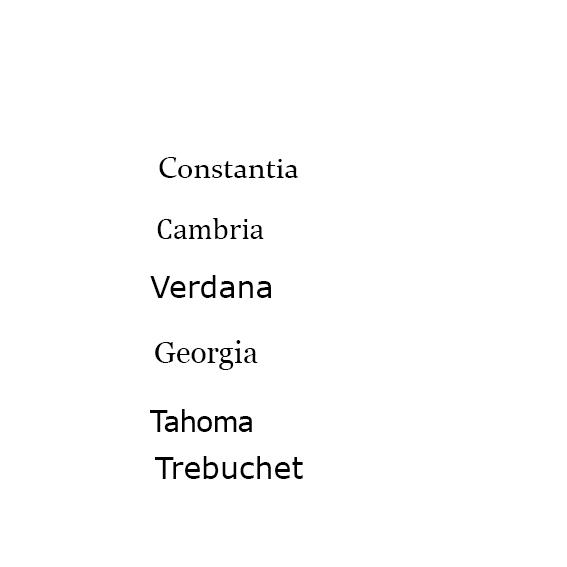
<style>
.page{position:relative;width:567px;height:567px;background:#ffffff}
.page>*{position:absolute;margin:0}
.t1{font:30px "Constantia";color:#000000}
.t2{font:30px "Cambria";color:#000000}
.t3{font:30px "Verdana";color:#000000}
.t4{font:30px "Georgia";color:#000000}
.t5{font:30px "Tahoma";color:#000000}
</style>
<div class="page">
<p class="t1" style="left:159px;top:157px;width:140px;height:21px">Constantia</p>
<p class="t2" style="left:157px;top:218px;width:107px;height:21px">Cambria</p>
<p class="t3" style="left:150px;top:275px;width:121px;height:23px">Verdana</p>
<p class="t4" style="left:155px;top:340px;width:103px;height:30px">Georgia</p>
<p class="t5" style="left:150px;top:409px;width:102px;height:23px">Tahoma</p>
<p class="t3" style="left:155px;top:456px;width:148px;height:23px">Trebuchet</p>
</div>
